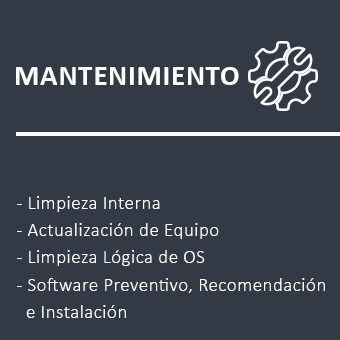
<style>
.page{position:relative;width:340px;height:340px;background:#333945}
.page>*{position:absolute;margin:0}
.t1{font:29px "Calibri-Bold";letter-spacing:0.025em;color:#ffffff}
.t2{font:19px/27.3px "Calibri-Light";letter-spacing:0.025em;color:#ffffff}
</style>
<div class="page">
<p class="t1" style="left:16px;top:67px;width:223px;height:18px">MANTENIMIENTO</p>
<p class="t2" style="left:17px;top:196px;width:308px;height:122px">- Limpieza Interna<br>- Actualización de Equipo<br>- Limpieza Lógica de OS<br>- Software Preventivo, Recomendación     <br>  e Instalación</p>
</div>
